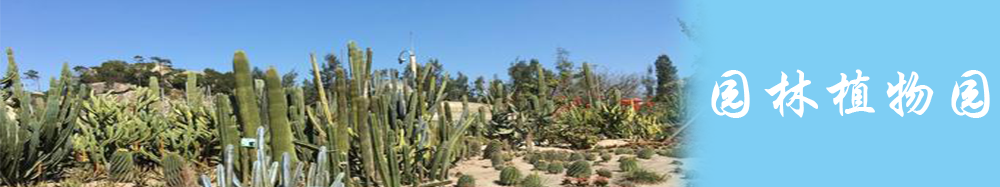
<style>
.page{position:relative;width:1000px;height:187px;background:#7ecef4}
.page>*{position:absolute;margin:0}
.t1{font:60px "STXingkai";color:#ffffff}
</style>
<div class="page">
<p class="t1" style="left:711px;top:69px;width:279px;height:49px">园林植物园</p>
</div>
